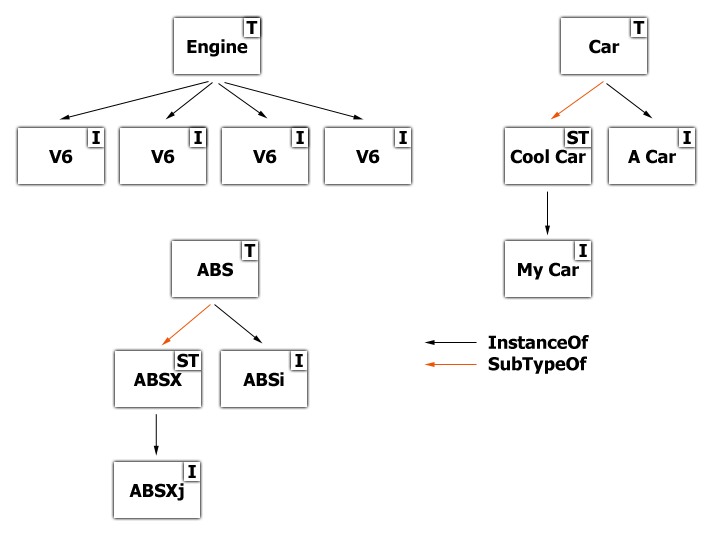
<style>
.page{position:relative;width:716px;height:536px;background:#ffffff}
.page>*{position:absolute;margin:0}
.t1{font:18px "Tahoma-Bold";color:#000000}
</style>
<div class="page">
<p class="t1" style="left:246px;top:21px;width:12px;height:13px">T</p>
<p class="t1" style="left:633px;top:21px;width:12px;height:13px">T</p>
<p class="t1" style="left:187px;top:39px;width:61px;height:18px">Engine</p>
<p class="t1" style="left:589px;top:39px;width:31px;height:15px">Car</p>
<p class="t1" style="left:92px;top:131px;width:8px;height:13px">I</p>
<p class="t1" style="left:194px;top:131px;width:8px;height:13px">I</p>
<p class="t1" style="left:296px;top:131px;width:8px;height:13px">I</p>
<p class="t1" style="left:399px;top:131px;width:8px;height:13px">I</p>
<p class="t1" style="left:567px;top:130px;width:22px;height:15px">ST</p>
<p class="t1" style="left:683px;top:131px;width:8px;height:13px">I</p>
<p class="t1" style="left:49px;top:149px;width:24px;height:15px">V6</p>
<p class="t1" style="left:151px;top:149px;width:24px;height:15px">V6</p>
<p class="t1" style="left:253px;top:149px;width:24px;height:15px">V6</p>
<p class="t1" style="left:356px;top:149px;width:24px;height:15px">V6</p>
<p class="t1" style="left:510px;top:149px;width:76px;height:15px">Cool Car</p>
<p class="t1" style="left:628px;top:149px;width:48px;height:15px">A Car</p>
<p class="t1" style="left:244px;top:244px;width:12px;height:13px">T</p>
<p class="t1" style="left:579px;top:244px;width:8px;height:13px">I</p>
<p class="t1" style="left:197px;top:262px;width:36px;height:15px">ABS</p>
<p class="t1" style="left:518px;top:262px;width:61px;height:18px">My Car</p>
<p class="t1" style="left:488px;top:335px;width:101px;height:39px">InstanceOf<br>SubTypeOf</p>
<p class="t1" style="left:177px;top:353px;width:22px;height:15px">ST</p>
<p class="t1" style="left:295px;top:354px;width:8px;height:13px">I</p>
<p class="t1" style="left:133px;top:372px;width:49px;height:15px">ABSX</p>
<p class="t1" style="left:243px;top:372px;width:41px;height:15px">ABSi</p>
<p class="t1" style="left:188px;top:465px;width:8px;height:13px">I</p>
<p class="t1" style="left:129px;top:483px;width:55px;height:18px">ABSXj</p>
</div>
